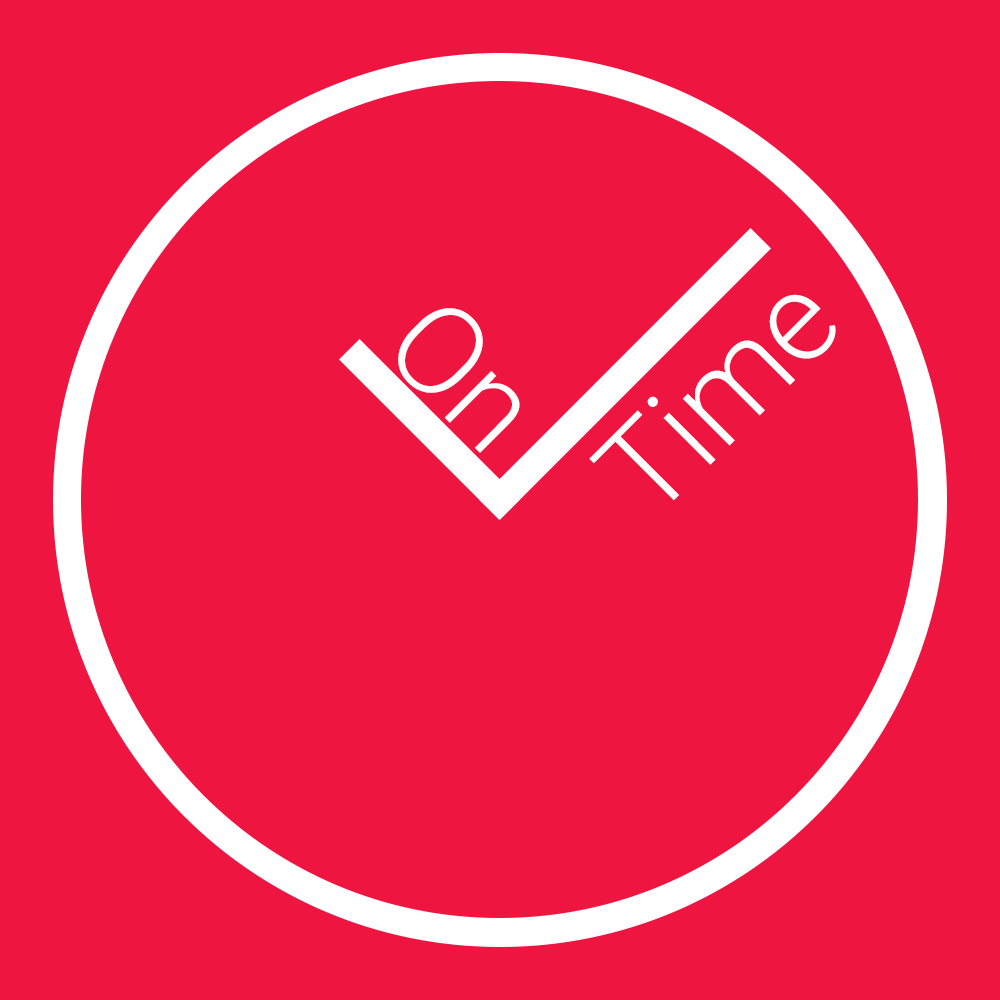
<style>
.page{position:relative;width:1000px;height:1000px;background:#ee1540}
.page>*{position:absolute;margin:0}
.t1{font:125px "Roboto-Light";color:#fffefe}
</style>
<div class="page">
<p class="t1" style="left:589px;top:294px;width:247px;height:207px;rotate:-45deg">Time</p>
<p class="t1" style="left:398px;top:308px;width:122px;height:145px;rotate:45deg">On</p>
</div>
